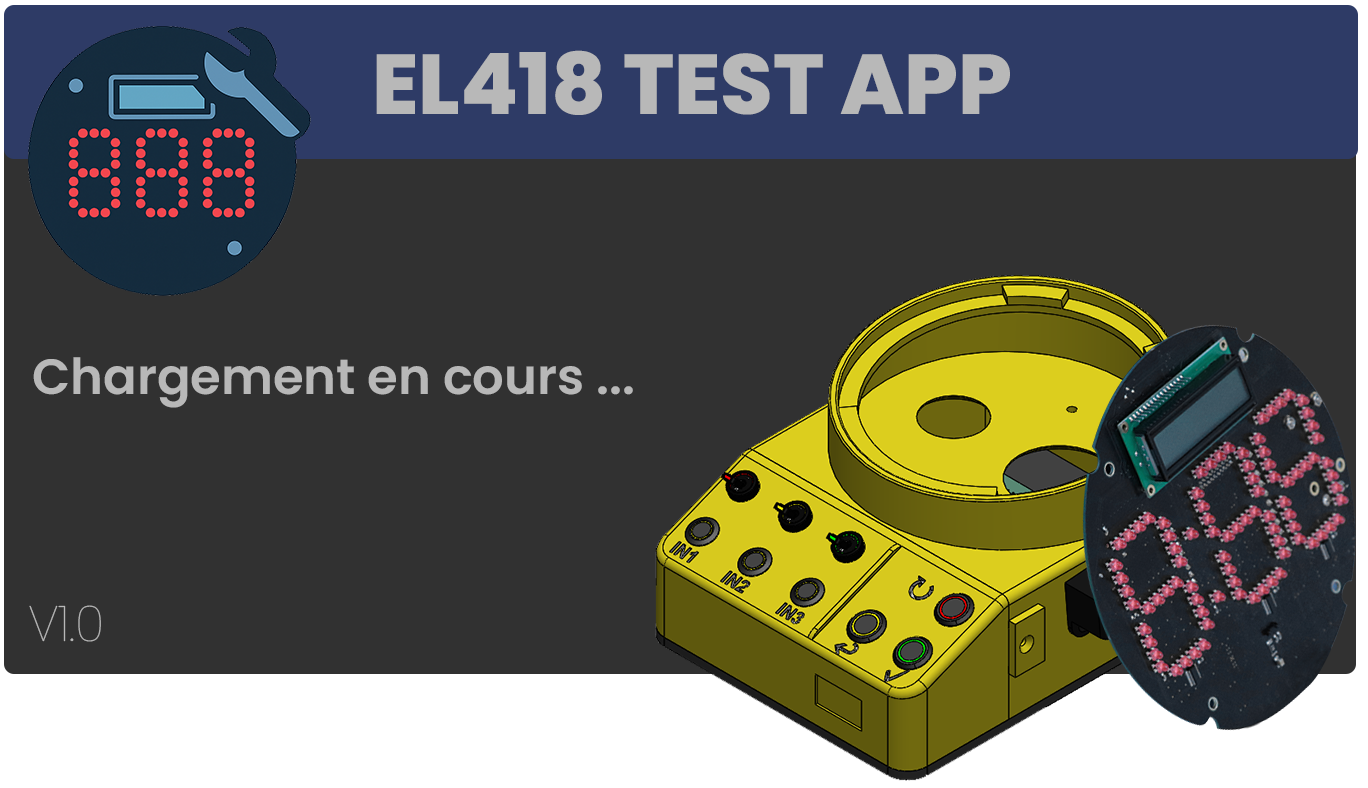
<style>
.page{position:relative;width:1368px;height:788px;background:#313131}
.page>*{position:absolute;margin:0}
.t1{font:84.8px "Poppins-ExtraBold";color:#b8b8b8}
.t2{font:49.6px "Poppins-SemiBold";color:#b8b8b8}
.t3{font:49.6px "Poppins-Thin";color:#b8b8b8}
</style>
<div class="page">
<p class="t1" style="left:376px;top:50px;width:634px;height:65px">EL418 TEST APP</p>
<p class="t2" style="left:33px;top:357px;width:600px;height:51px">Chargement en cours ...</p>
<p class="t3" style="left:29px;top:605px;width:72px;height:37px">V1.0</p>
</div>
